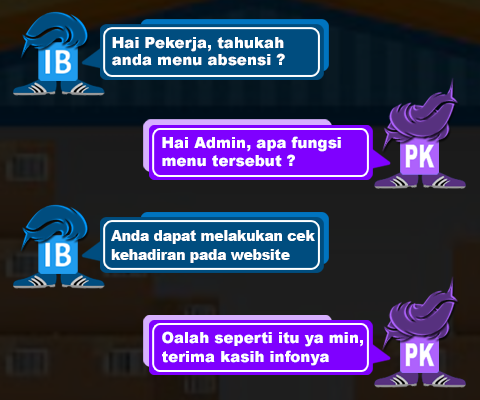
<style>
.page{position:relative;width:480px;height:400px}
.page>*{position:absolute;margin:0}
.t1{font:15.2px/420px "Arial-Black";color:#ffffff}
.t2{font:15.2px/419.7px "Arial-Black";color:#ffffff;scale:0.9 1}
</style>
<div class="page">
<p class="t1" style="left:112px;top:37px;width:173px;height:29px">Hai Pekerja, tahukah<br>anda menu absensi ?</p>
<p class="t1" style="left:162px;top:136px;width:179px;height:31px">Hai Admin, apa fungsi<br>menu tersebut ?</p>
<p class="t2" style="left:111px;top:230px;width:204px;height:33px">Anda dapat melakukan cek<br>kehadiran pada website</p>
<p class="t1" style="left:162px;top:331px;width:201px;height:35px">Oalah seperti itu ya min,<br>terima kasih infonya</p>
</div>
